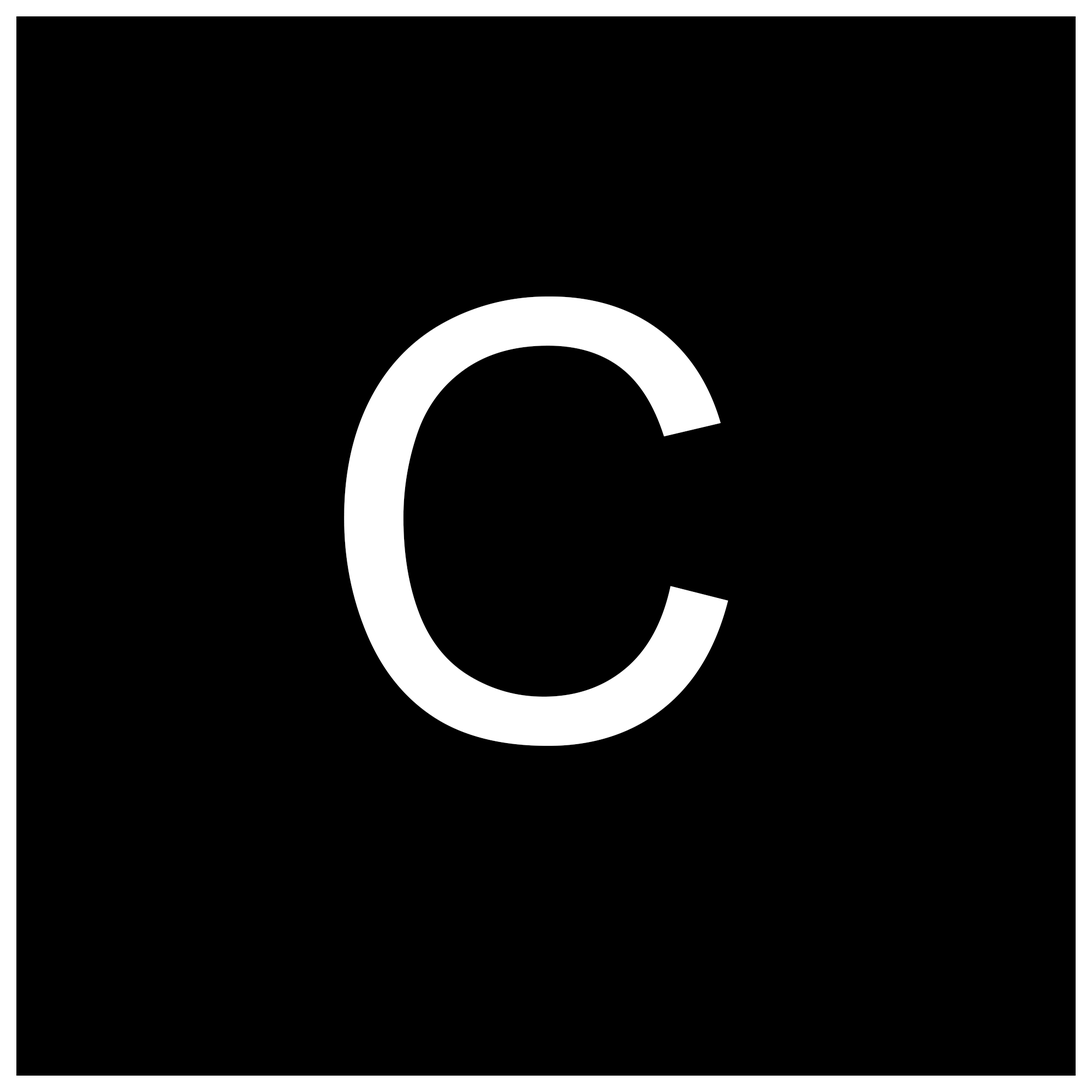
<style>
.page{position:relative;width:1092px;height:1092px;background:#000000}
.page>*{position:absolute;margin:0}
.t1{font:606.7px "ArialMT";color:#ffffff}
</style>
<div class="page">
<p class="t1" style="left:344px;top:296px;width:384px;height:450px">C</p>
</div>
